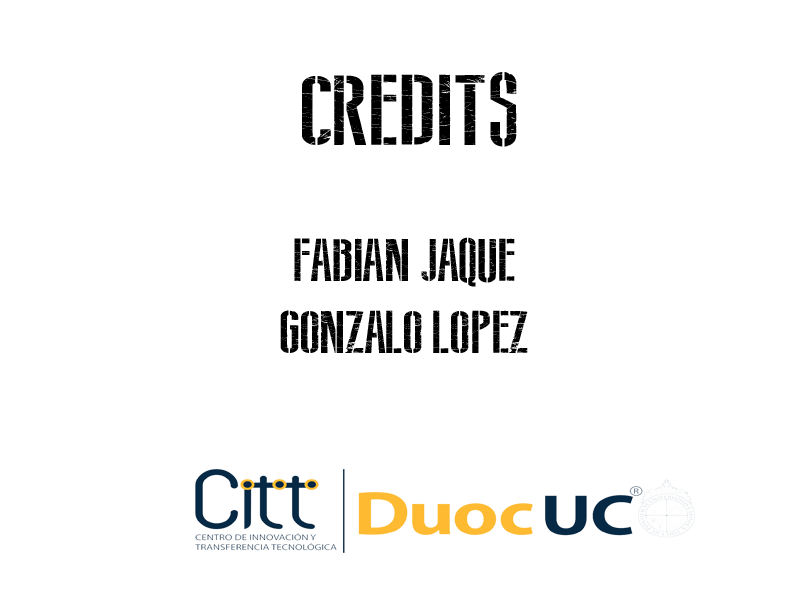
<style>
.page{position:relative;width:800px;height:600px;background:#ffffff}
.page>*{position:absolute;margin:0}
.t1{font:100px "SovietStyle";color:#000000}
.t2{font:60px "SovietStyle";color:#000000}
</style>
<div class="page">
<p class="t1" style="left:302px;top:72px;width:215px;height:75px">CREDITS</p>
<p class="t2" style="left:280px;top:237px;width:248px;height:116px;text-align:center">Fabian jaque<br>Gonzalo lopez</p>
</div>
